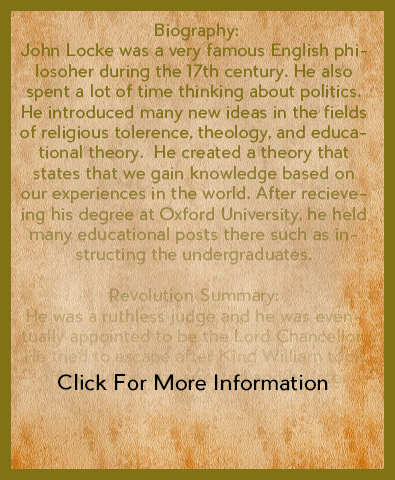
<style>
.page{position:relative;width:395px;height:480px}
.page>*{position:absolute;margin:0}
.t1{font:17px "PierSans"}
.t2{font:21px "PierSans";color:#000000}
</style>
<div class="page">
<p class="t1" style="left:20px;top:23px;width:347px;height:426px;text-align:center">Biography:<br>John Locke was a very famous English philosoher during the 17th century. He also spent a lot of time thinking about politics. He introduced many new ideas in the fields of religious tolerence, theology, and educational theory.  He created a theory that states that we gain knowledge based on our experiences in the world. After recieveing his degree at Oxford University, he held many educational posts there such as instructing the undergraduates. <br><br>Revolution Summary:<br>He was a ruthless judge and he was eventually appointed to be the Lord Chancellor. He tried to escape after King William took office but he was arrested and he later died.<br><br>Strengths and Weaknesses:<br>Rousseau’s ideas are still used today in many different areas. However, he was the least</p>
<p class="t2" style="left:58px;top:373px;width:270px;height:18px">Click For More Information</p>
</div>
